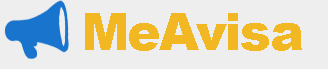
<style>
.page{position:relative;width:328px;height:69px;background:#eeeeee}
.page>*{position:absolute;margin:0}
.t1{font:51.3px "Arial-Black";letter-spacing:-0.04em;color:#f2b824}
</style>
<div class="page">
<p class="t1" style="left:85px;top:13px;width:217px;height:38px">MeAvisa</p>
</div>
